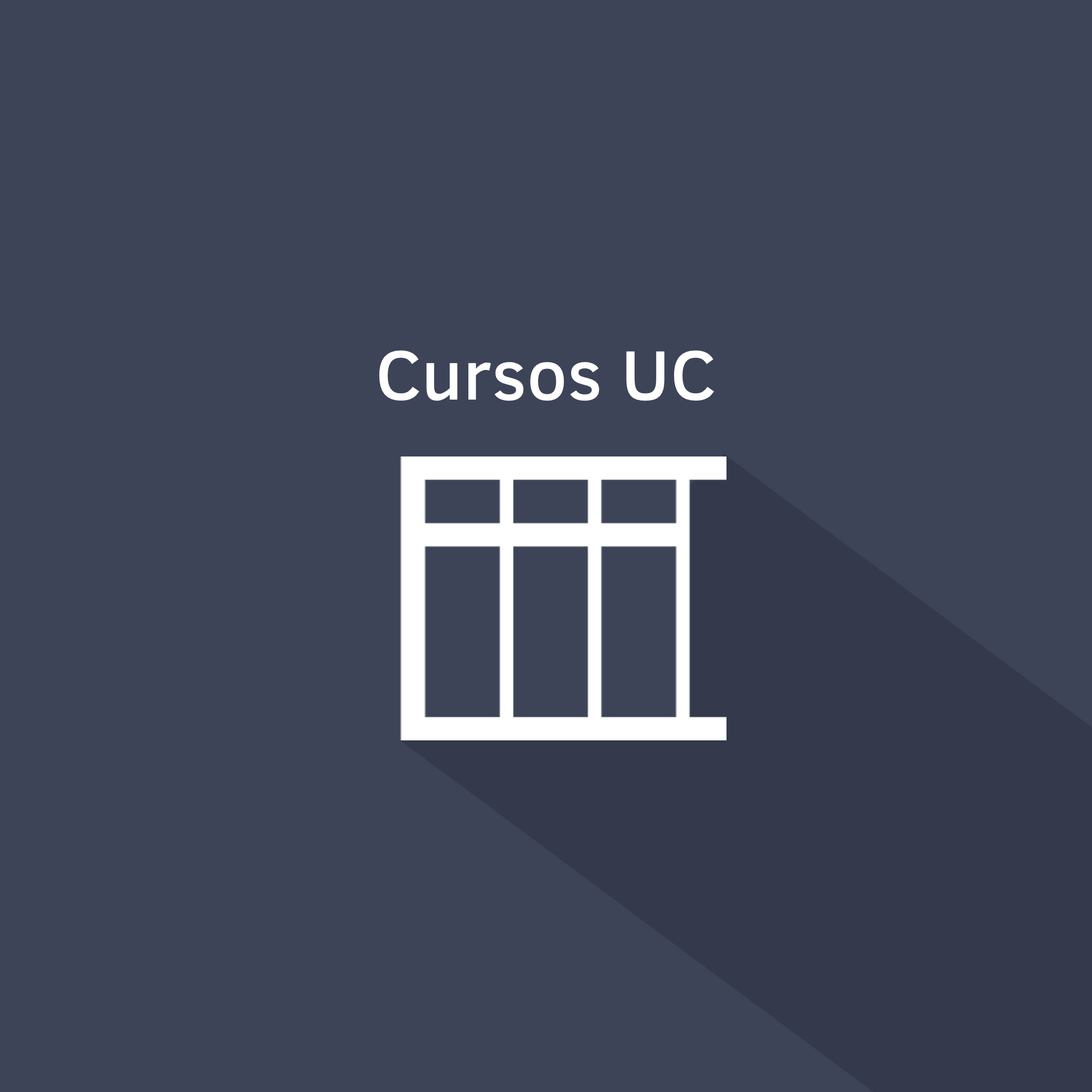
<style>
.page{position:relative;width:1092px;height:1092px;background:#3d4458}
.page>*{position:absolute;margin:0}
.t1{font:71.2px "ClearSans-Medium";color:#ffffff}
</style>
<div class="page">
<p class="t1" style="left:379px;top:350px;width:335px;height:51px">Cursos UC</p>
</div>
